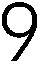
<style>
.page{position:relative;width:40px;height:64px;background:#ffffff}
.page>*{position:absolute;margin:0}
.t1{font:74px "OPPOSans-R";color:#000000}
</style>
<div class="page">
<p class="t1" style="left:2px;top:2px;width:35px;height:59px">9</p>
</div>
